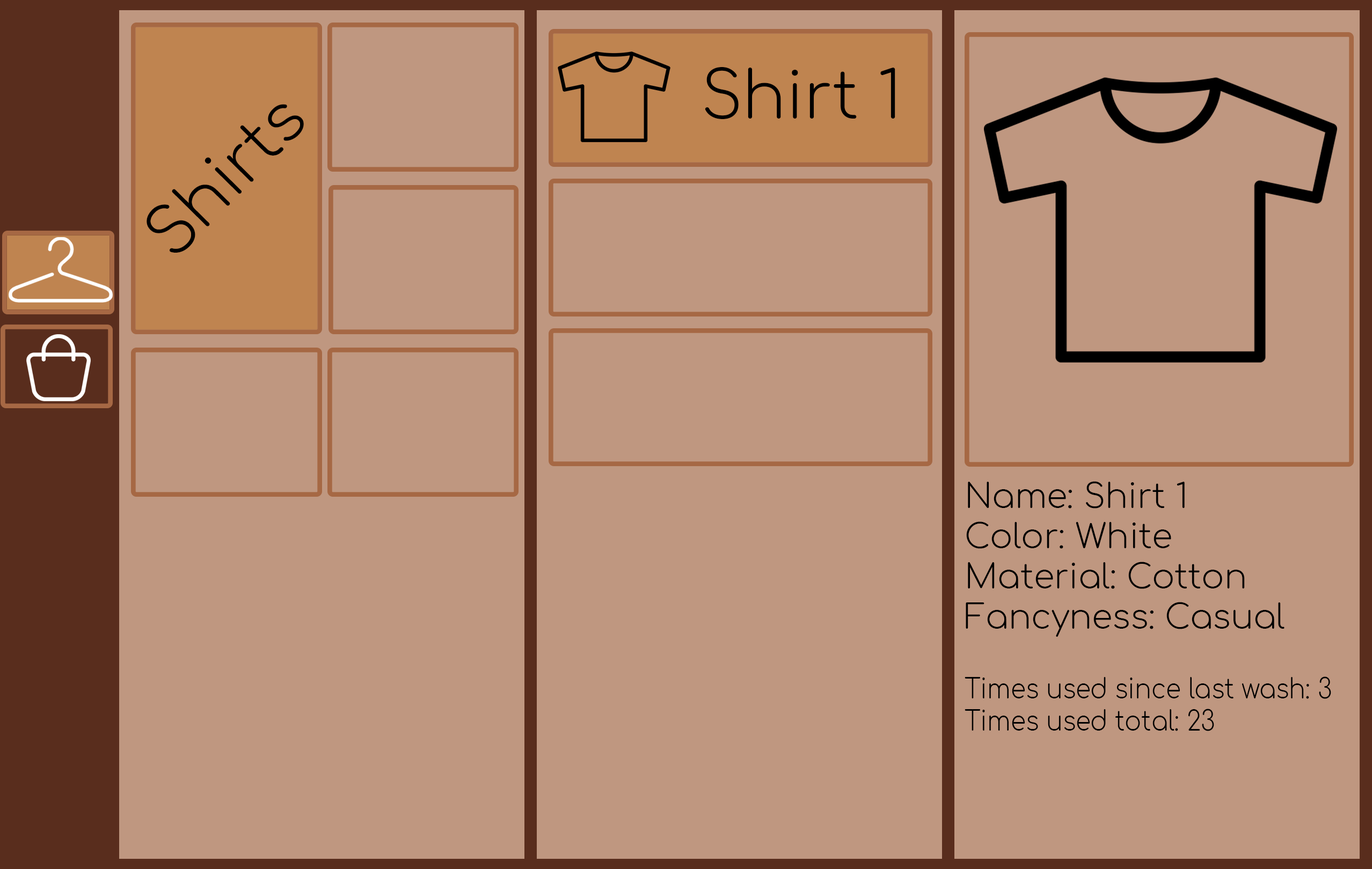
<style>
.page{position:relative;width:1372px;height:869px;background:#bf9780}
.page>*{position:absolute;margin:0}
.t1{font:64.6px "Comfortaa-Light";color:#000000}
.t2{font:65.3px "Comfortaa-Light";color:#000000}
.t3{font:33.6px "Comfortaa-Light";color:#000000}
.t4{font:26.8px "Comfortaa-Light";color:#000000;scale:0.92 1}
</style>
<div class="page">
<p class="t1" style="left:705px;top:67px;width:190px;height:52px">Shirt 1</p>
<p class="t2" style="left:147px;top:104px;width:157px;height:149px;rotate:-45deg">Shirts</p>
<p class="t3" style="left:965px;top:481px;width:319px;height:156px">Name: Shirt 1<br>Color: White<br>Material: Cotton<br>Fancyness: Casual</p>
<p class="t4" style="left:964px;top:677px;width:367px;height:54px">Times used since last wash: 3<br>Times used total: 23</p>
</div>
